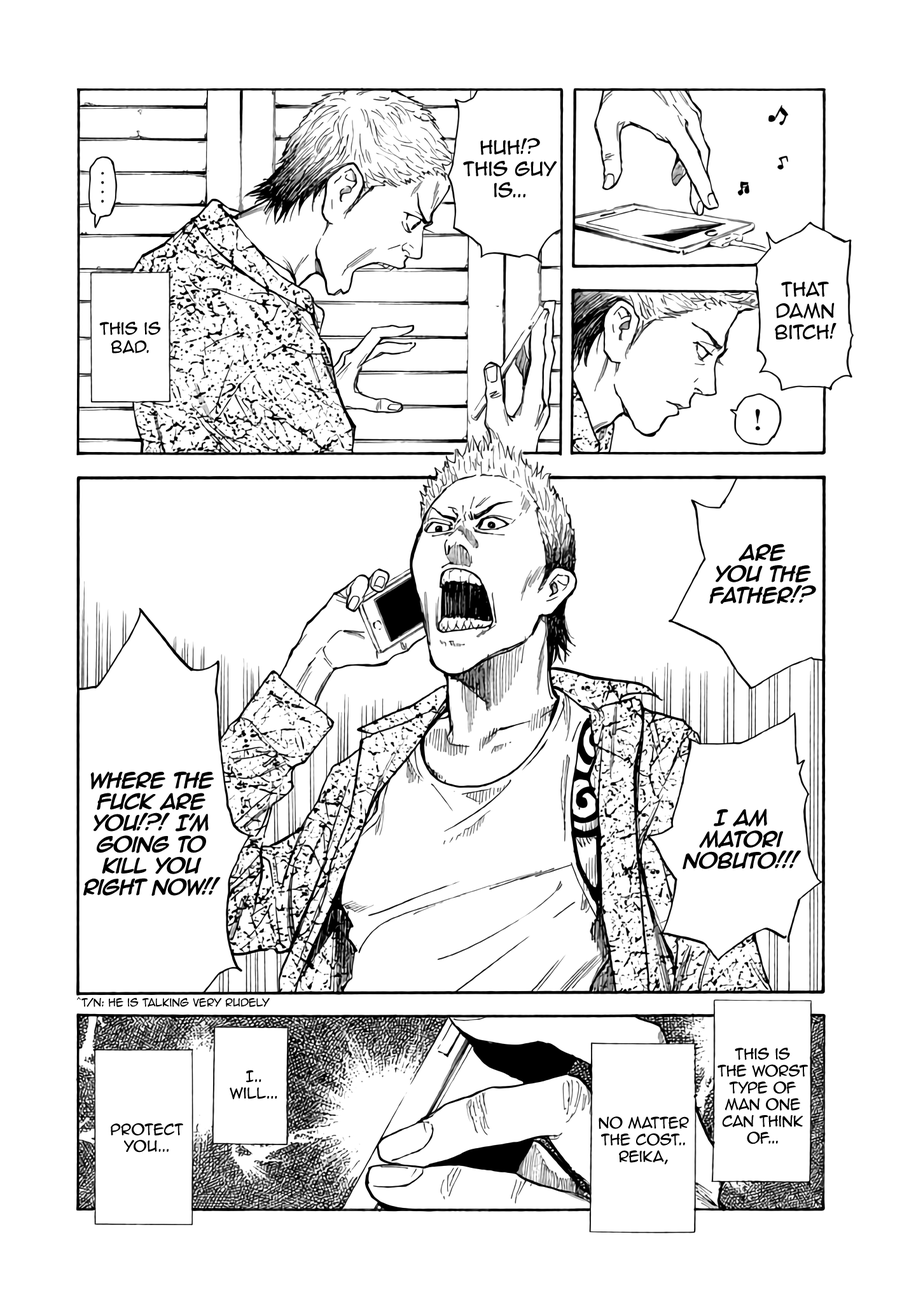
<style>
.page{position:relative;width:916px;height:1302px;background:#ffffff}
.page>*{position:absolute;margin:0}
.t1{font:17.8px "AnimeAce2.0BB";letter-spacing:-0.025em;color:#000000}
.t2{font:15.3px "AnimeAce2.0BB";letter-spacing:-0.025em;color:#000000}
.t3{font:17.8px "AnimeAce2.0BB-Bold";letter-spacing:-0.025em;color:#000000}
.t4{font:10.2px "AnimeAce2.0BB";letter-spacing:-0.025em;color:#000000}
.t5{font:14px "AnimeAce2.0BB";letter-spacing:-0.025em;color:#000000}
</style>
<div class="page">
<p class="t1" style="left:463px;top:138px;width:94px;height:60px;text-align:center">Huh!? This guy is...</p>
<p class="t1" style="left:774px;top:282px;width:62px;height:58px;text-align:center">that damn bitch!</p>
<p class="t2" style="left:99px;top:322px;width:62px;height:32px;text-align:center">THis is bad.</p>
<p class="t3" style="left:709px;top:544px;width:107px;height:60px;text-align:center">Are you the father!?</p>
<p class="t3" style="left:83px;top:771px;width:138px;height:126px;text-align:center">Where the fuck are you!?! I’m going to kill you right now!!</p>
<p class="t3" style="left:682px;top:809px;width:119px;height:61px;text-align:center">I am Matori Nobuto!!!</p>
<p class="t4" style="left:77px;top:997px;width:193px;height:10px">^T/N: He is talking very rudely</p>
<p class="t5" style="left:717px;top:1048px;width:91px;height:97px;text-align:center">This is <br>the worst type of man one can think of...</p>
<p class="t5" style="left:230px;top:1070px;width:47px;height:30px;text-align:center">I.. will...</p>
<p class="t5" style="left:598px;top:1117px;width:91px;height:48px;text-align:center">No matter the cost.. Reika,</p>
<p class="t5" style="left:111px;top:1123px;width:72px;height:30px;text-align:center">protect you...</p>
</div>
